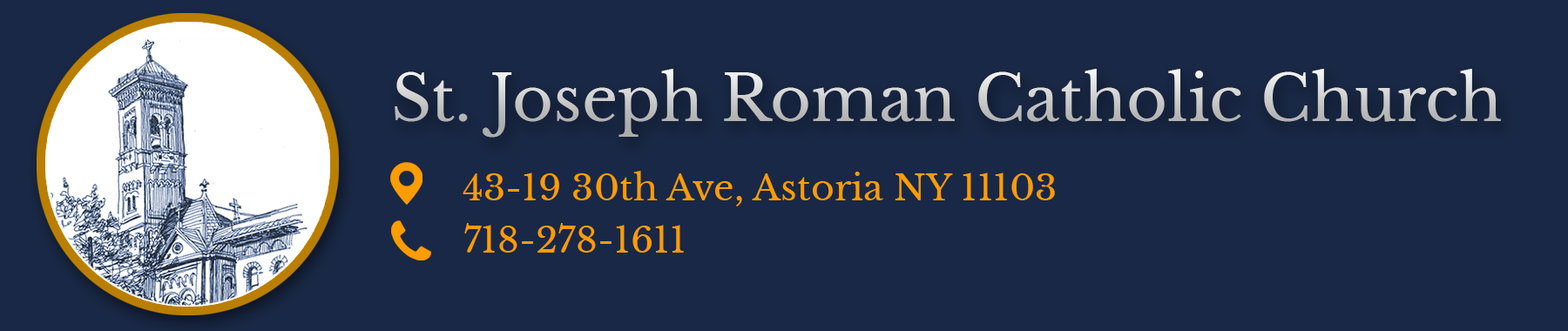
<style>
.page{position:relative;width:1568px;height:331px;background:#192846}
.page>*{position:absolute;margin:0}
.t1{font:62.7px "LibreBaskerville-Regular";color:#c7c7c7}
.t2{font:36px "LibreBaskerville-Regular";color:#ff9c00}
</style>
<div class="page">
<p class="t1" style="left:395px;top:69px;width:1106px;height:69px">St. Joseph Roman Catholic Church</p>
<p class="t2" style="left:463px;top:171px;width:592px;height:35px">43-19 30th Ave, Astoria NY 11103</p>
<p class="t2" style="left:464px;top:223px;width:220px;height:30px">718-278-1611</p>
</div>
